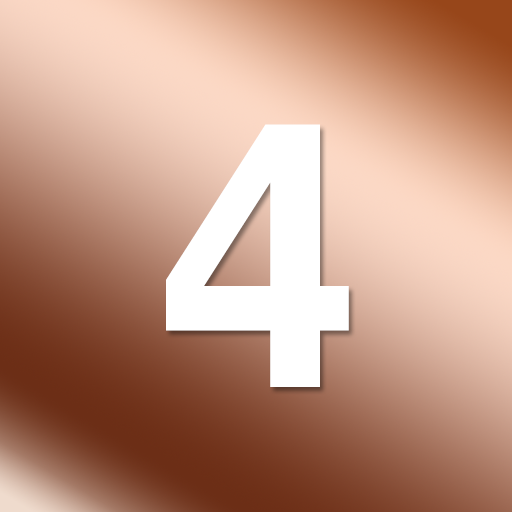
<style>
.page{position:relative;width:512px;height:512px}
.page>*{position:absolute;margin:0}
.t1{font:360px "Menlo-Bold";color:#ffffff;text-transform:uppercase}
</style>
<div class="page">
<p class="t1" style="left:166px;top:124px;width:183px;height:263px">4</p>
</div>
